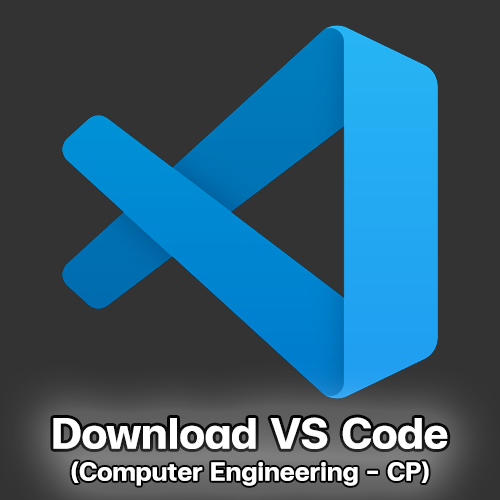
<style>
.page{position:relative;width:500px;height:500px;background:#333333}
.page>*{position:absolute;margin:0}
.t1{font:60px "FCMinimalBold";color:#ffffff}
.t2{font:36px "FCMinimalBold";color:#ffffff}
</style>
<div class="page">
<p class="t1" style="left:53px;top:417px;width:395px;height:32px">Download VS Code</p>
<p class="t2" style="left:71px;top:461px;width:358px;height:25px">(Computer Engineering - CP)</p>
</div>
